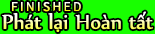
<style>
.page{position:relative;width:155px;height:34px;background:#18ff00}
.page>*{position:absolute;margin:0}
.t1{font:24px "UTM-Nyala"}
</style>
<div class="page">
<p class="t1" style="left:2px;top:11px;width:151px;height:21px">Phát lại Hoàn tất</p>
</div>
